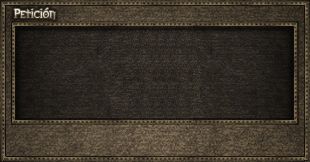
<style>
.page{position:relative;width:310px;height:162px}
.page>*{position:absolute;margin:0}
.t1{font:12px "Morpheus"}
</style>
<div class="page">
<p class="t1" style="left:14px;top:8px;width:42px;height:12px">Petición</p>
</div>
